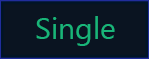
<style>
.page{position:relative;width:149px;height:59px;background:#0a1421}
.page>*{position:absolute;margin:0}
.t1{font:30px "SegoeUISymbol";color:#19b579}
</style>
<div class="page">
<p class="t1" style="left:36px;top:16px;width:79px;height:30px">Single</p>
</div>
